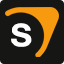
<style>
.page{position:relative;width:64px;height:64px;background:#161614}
.page>*{position:absolute;margin:0}
.t1{font:31.1px "HelveticaNeueCE-Bold";color:#ffffff;text-transform:uppercase;scale:1.07 1}
</style>
<div class="page">
<p class="t1" style="left:11px;top:23px;width:21px;height:24px">S</p>
</div>
